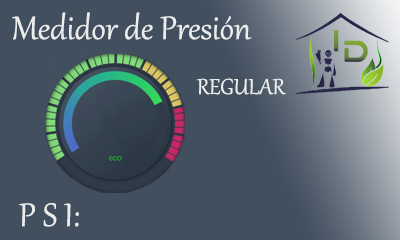
<style>
.page{position:relative;width:400px;height:240px;background:#424f5f}
.page>*{position:absolute;margin:0}
.t1{font:40px "Gabriola";color:#ebedec}
.t2{font:26.7px "Gabriola";color:#ebedec}
</style>
<div class="page">
<p class="t1" style="left:12px;top:12px;width:240px;height:28px">Medidor de Presión</p>
<p class="t2" style="left:197px;top:78px;width:89px;height:17px">REGULAR</p>
<p class="t1" style="left:19px;top:203px;width:60px;height:24px">P S I:</p>
</div>
